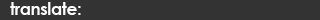
<style>
.page{position:relative;width:320px;height:20px;background:#333333}
.page>*{position:absolute;margin:0}
.t1{font:17px "CenturyGothic-Bold";letter-spacing:-0.025em;color:#fefefe}
</style>
<div class="page">
<p class="t1" style="left:10px;top:2px;width:71px;height:13px">translate:</p>
</div>
